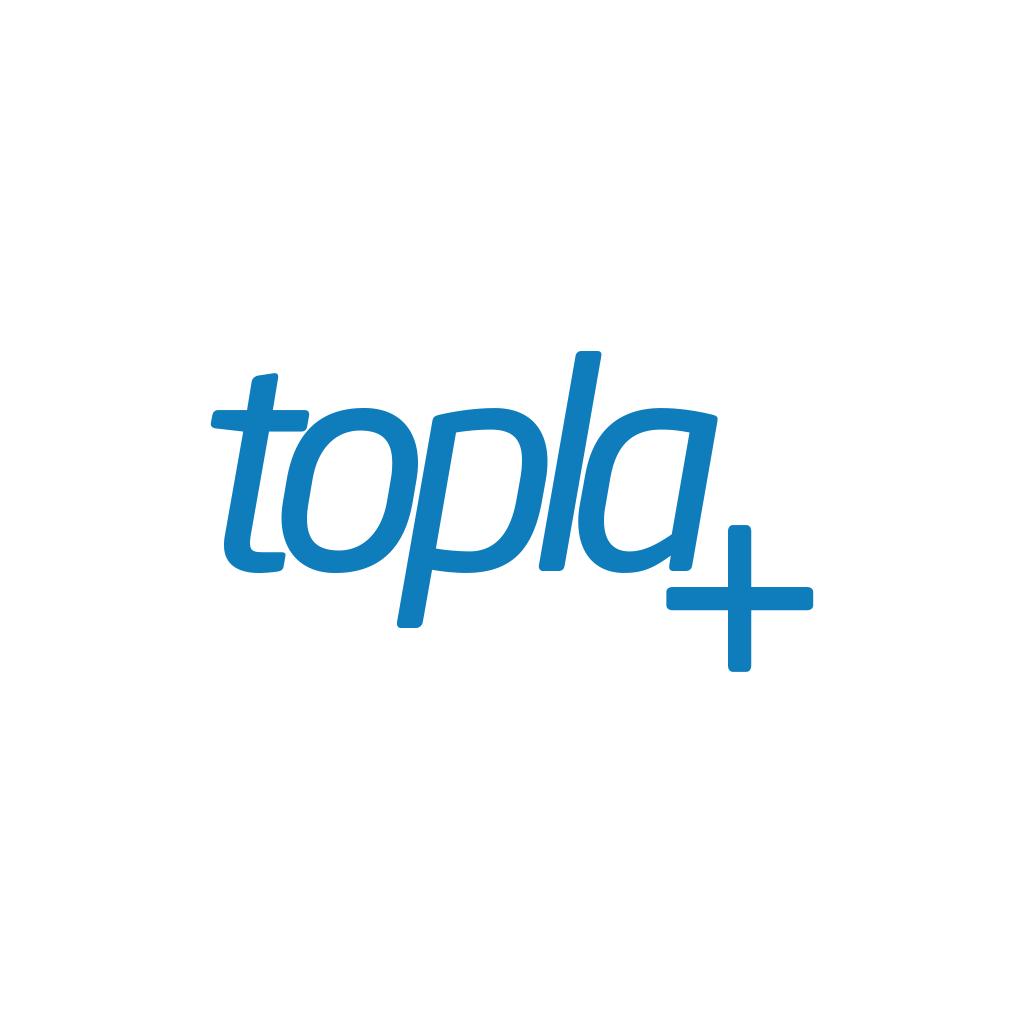
<style>
.page{position:relative;width:1024px;height:1024px;background:#ffffff}
.page>*{position:absolute;margin:0}
.t1{font:292.2px "NeoSansStdItalicTR";letter-spacing:-0.1em;color:#0f7cbb}
.t2{font:322.7px "NeoSansStdItalicTR";letter-spacing:-0.1em;color:#0f7cbb}
</style>
<div class="page">
<p class="t1" style="left:210px;top:351px;width:508px;height:277px">topla</p>
<p class="t2" style="left:666px;top:525px;width:148px;height:147px">+</p>
</div>
